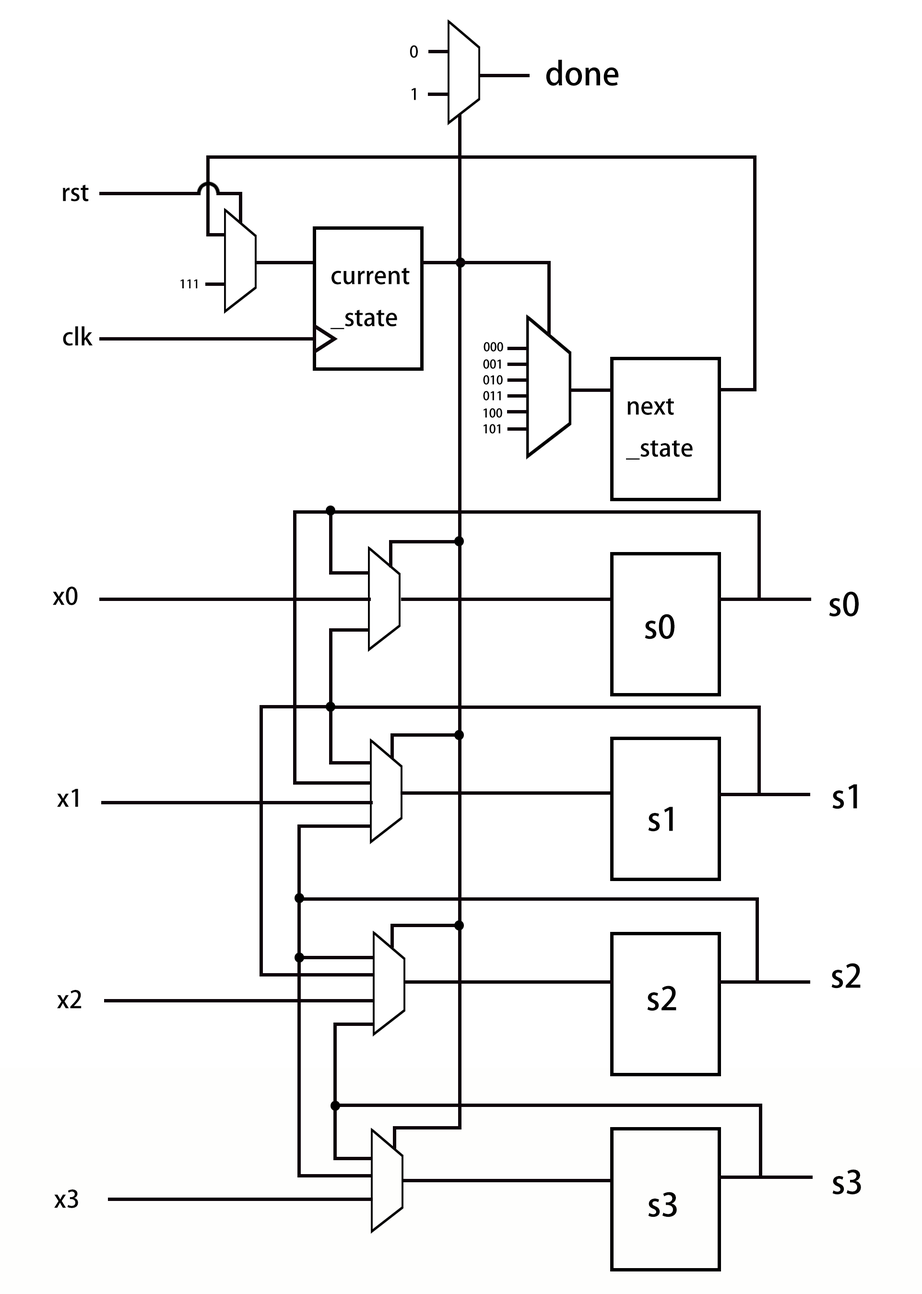
<style>
.page{position:relative;width:922px;height:1294px;background:#ffffff}
.page>*{position:absolute;margin:0}
.t1{font:16px "AdobeHeitiStd-Regular";color:#000000}
.t2{font:32px "AdobeHeitiStd-Regular";color:#000000}
.t3{font:24px "AdobeHeitiStd-Regular";color:#000000}
.t4{font:12px "AdobeHeitiStd-Regular";color:#000000}
</style>
<div class="page">
<p class="t1" style="left:410px;top:45px;width:8px;height:13px">0</p>
<p class="t2" style="left:546px;top:59px;width:73px;height:27px">done</p>
<p class="t1" style="left:411px;top:88px;width:5px;height:12px">1</p>
<p class="t3" style="left:63px;top:185px;width:26px;height:16px">rst</p>
<p class="t3" style="left:330px;top:268px;width:80px;height:61px">current<br>_state</p>
<p class="t4" style="left:180px;top:279px;width:18px;height:10px">111</p>
<p class="t3" style="left:63px;top:326px;width:30px;height:20px">clk</p>
<p class="t3" style="left:626px;top:398px;width:66px;height:62px">next<br>_state</p>
<p class="t3" style="left:53px;top:586px;width:25px;height:19px">x0</p>
<p class="t2" style="left:829px;top:591px;width:29px;height:26px">s0</p>
<p class="t2" style="left:644px;top:614px;width:30px;height:25px">s0</p>
<p class="t2" style="left:832px;top:784px;width:25px;height:25px">s1</p>
<p class="t3" style="left:57px;top:788px;width:21px;height:19px">x1</p>
<p class="t2" style="left:648px;top:807px;width:25px;height:25px">s1</p>
<p class="t2" style="left:831px;top:963px;width:29px;height:25px">s2</p>
<p class="t3" style="left:57px;top:990px;width:25px;height:18px">x2</p>
<p class="t2" style="left:647px;top:985px;width:29px;height:26px">s2</p>
<p class="t2" style="left:832px;top:1169px;width:29px;height:26px">s3</p>
<p class="t3" style="left:54px;top:1189px;width:24px;height:19px">x3</p>
<p class="t2" style="left:648px;top:1192px;width:29px;height:25px">s3</p>
</div>
